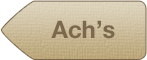
<style>
.page{position:relative;width:147px;height:60px}
.page>*{position:absolute;margin:0}
.t1{font:24px "HelveticaNeue-Bold";color:#7c684c}
</style>
<div class="page">
<p class="t1" style="left:51px;top:20px;width:64px;height:19px">Ach’s</p>
</div>
